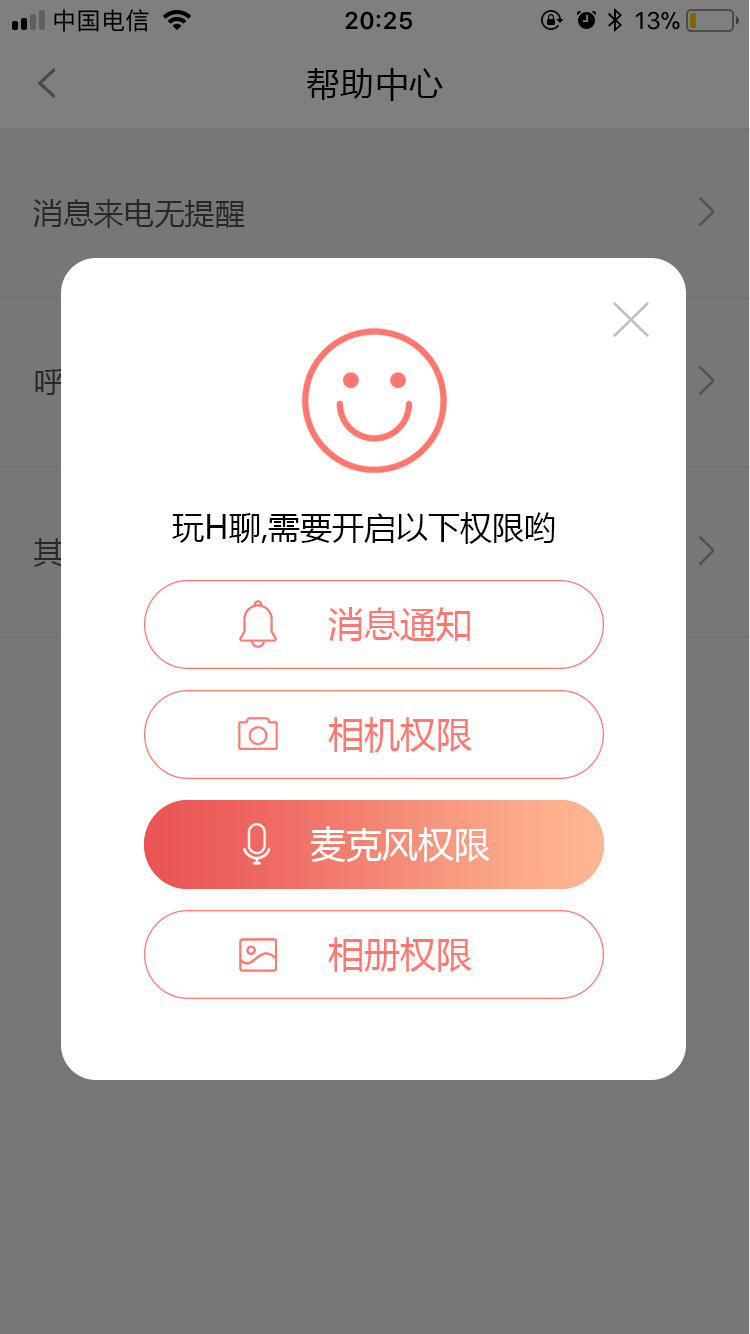
<style>
.page{position:relative;width:750px;height:1334px;background:#ffffff}
.page>*{position:absolute;margin:0}
.t1{font:34px "MicrosoftYaHei";letter-spacing:0.01em;color:#000000}
.t2{font:30px "MicrosoftYaHei";letter-spacing:0.01em;color:#282828}
.t3{font:32px "MicrosoftYaHei";color:#000000}
.t4{font:36px "MicrosoftYaHei";color:#ff776e}
.t5{font:36px "MicrosoftYaHei";color:#ffffff}
</style>
<div class="page">
<p class="t1" style="left:307px;top:68px;width:136px;height:33px">帮助中心</p>
<p class="t2" style="left:33px;top:199px;width:212px;height:29px">消息来电无提醒</p>
<p class="t3" style="left:172px;top:512px;width:383px;height:32px">玩H聊,需要开启以下权限哟</p>
<p class="t4" style="left:328px;top:607px;width:142px;height:35px">消息通知</p>
<p class="t4" style="left:328px;top:717px;width:144px;height:36px">相机权限</p>
<p class="t4" style="left:328px;top:717px;width:144px;height:36px">相机权限</p>
<p class="t5" style="left:310px;top:826px;width:180px;height:36px">麦克风权限</p>
<p class="t5" style="left:310px;top:826px;width:180px;height:36px">麦克风权限</p>
<p class="t4" style="left:328px;top:937px;width:144px;height:36px">相机权限</p>
<p class="t4" style="left:328px;top:937px;width:144px;height:35px">相册权限</p>
</div>
